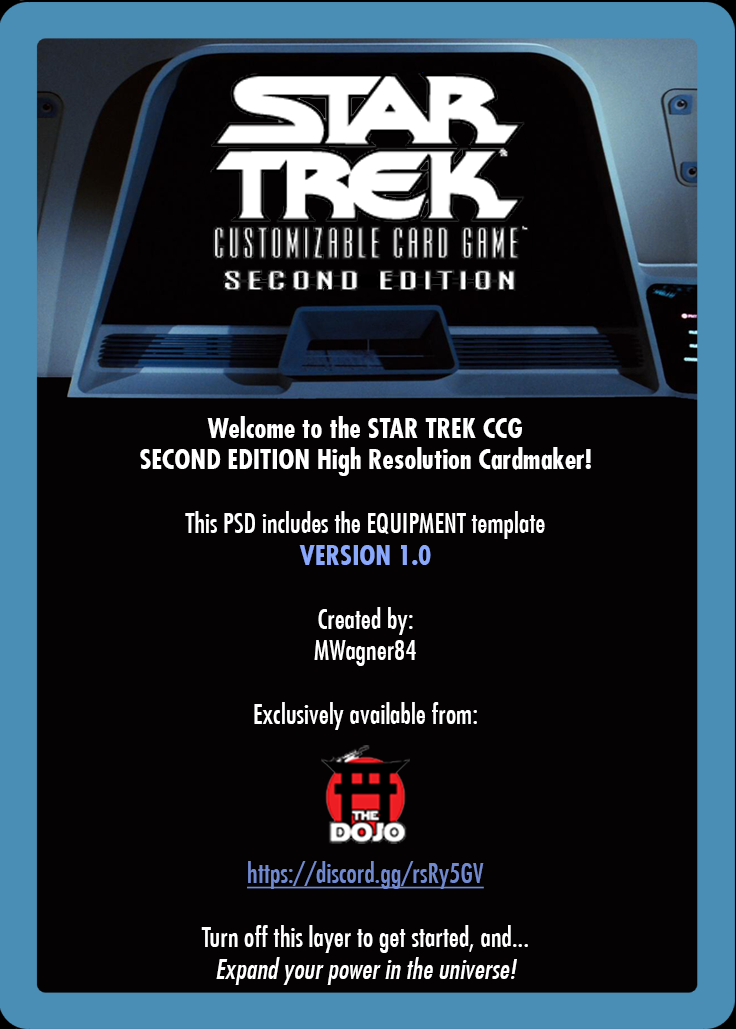
<style>
.page{position:relative;width:736px;height:1029px;background:#040203}
.page>*{position:absolute;margin:0}
.t1{font:27.5px/31.8px "FuturaLT-CondensedBold";color:#ffffff}
.t2{font:27.5px/31.8px "FuturaLT-Condensed";color:#ffffff}
.t3{font:27.5px/31.8px "FuturaLT-CondensedBold";color:#8aa8fc}
.t4{font:27.5px/31.8px "FuturaLT-Condensed";color:#7189cf;text-decoration:underline}
.t5{font:27.5px/31.8px "FuturaLT-CondensedOblique";color:#ffffff}
</style>
<div class="page">
<p class="t1" style="left:140px;top:416px;width:451px;height:569px;text-align:center">Welcome to the STAR TREK CCG<br>SECOND EDITION High Resolution Cardmaker!<br><br><span class="t2">This PSD includes the EQUIPMENT template<br></span><span class="t3">VERSION 1.0<br></span><span class="t2"><br>Created by:<br>MWagner84<br><br>Exclusively available from:<br><br><br><br><br></span><span class="t4">https://discord.gg/rsRy5GV<br></span><span class="t2"><br>Turn off this layer to get started, and...<br></span><span class="t5">Expand your power in the universe!</span></p>
</div>
